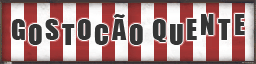
<style>
.page{position:relative;width:256px;height:64px}
.page>*{position:absolute;margin:0}
.t1{font:26.7px "Impact";letter-spacing:0.09em;color:#353535;text-transform:uppercase}
</style>
<div class="page">
<p class="t1" style="left:112px;top:14px;width:15px;height:26px">ã</p>
<p class="t1" style="left:201px;top:14px;width:13px;height:21px">n</p>
<p class="t1" style="left:235px;top:14px;width:10px;height:21px">e</p>
<p class="t1" style="left:11px;top:19px;width:14px;height:21px">g</p>
<p class="t1" style="left:28px;top:24px;width:14px;height:21px">o</p>
<p class="t1" style="left:45px;top:19px;width:14px;height:21px">s</p>
<p class="t1" style="left:62px;top:24px;width:13px;height:21px">t</p>
<p class="t1" style="left:77px;top:19px;width:14px;height:21px">o</p>
<p class="t1" style="left:94px;top:24px;width:15px;height:21px">c</p>
<p class="t1" style="left:129px;top:24px;width:14px;height:21px">o</p>
<p class="t1" style="left:152px;top:19px;width:14px;height:23px">q</p>
<p class="t1" style="left:170px;top:24px;width:13px;height:21px">u</p>
<p class="t1" style="left:187px;top:19px;width:10px;height:21px">e</p>
<p class="t1" style="left:218px;top:19px;width:13px;height:21px">t</p>
</div>
